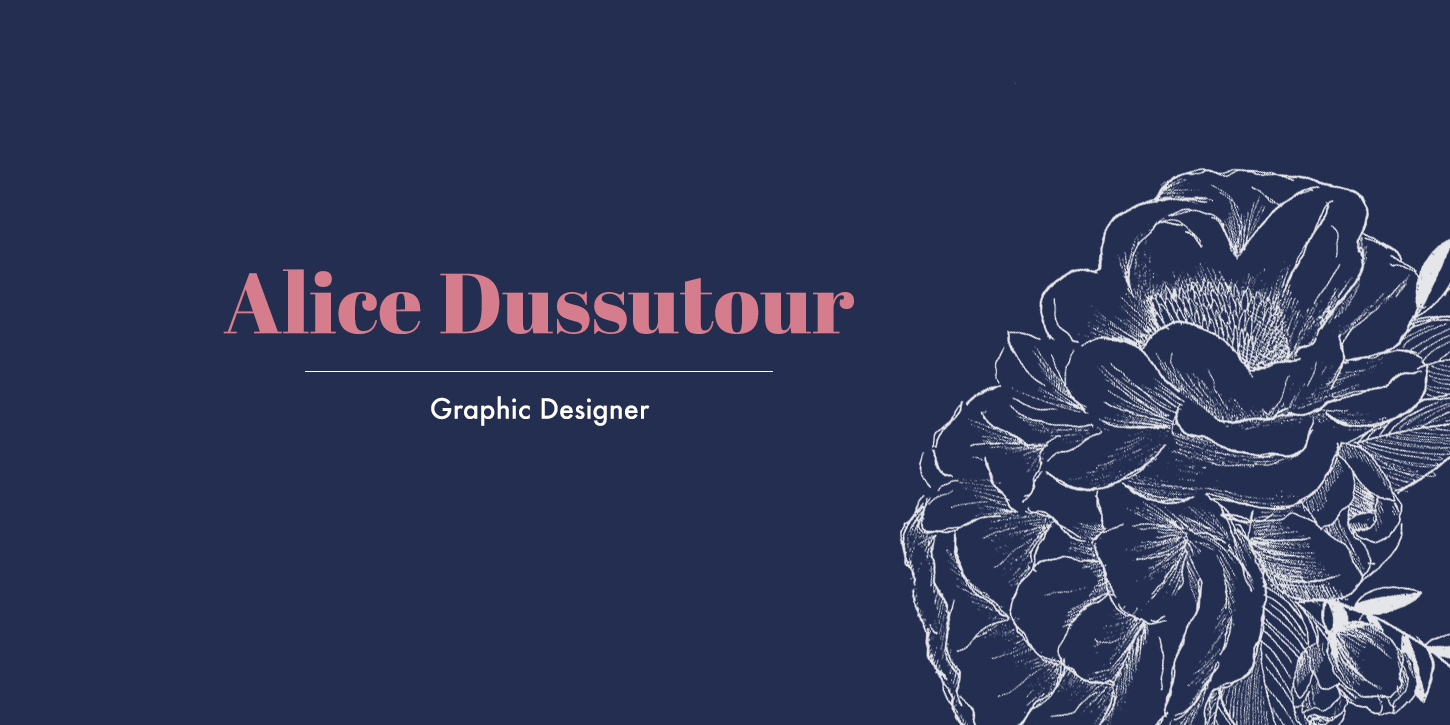
<style>
.page{position:relative;width:1450px;height:725px;background:#232e51}
.page>*{position:absolute;margin:0}
.t1{font:85px "AbrilFatface-Regular";letter-spacing:0.005em;color:#d67d8d}
.t2{font:27.2px "Futura-Medium";letter-spacing:0.005em;color:#ffffff}
</style>
<div class="page">
<p class="t1" style="left:223px;top:269px;width:631px;height:65px">Alice Dussutour</p>
<p class="t2" style="left:431px;top:396px;width:219px;height:30px">Graphic Designer</p>
</div>
